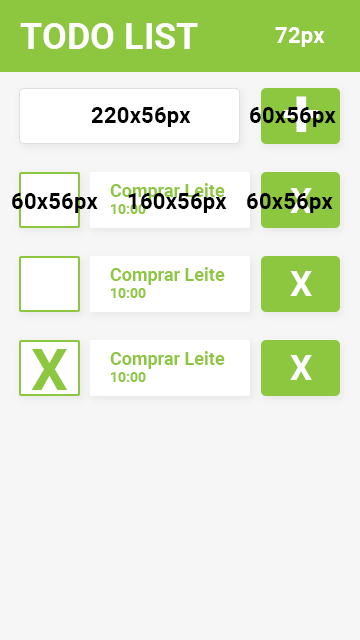
<style>
.page{position:relative;width:360px;height:640px;background:#f6f6f6}
.page>*{position:absolute;margin:0}
.t1{font:36px "Roboto-Bold";color:#ffffff}
.t2{font:22.4px "Roboto-Bold";color:#ffffff}
.t3{font:70.6px "Roboto-Bold";color:#fefefe}
.t4{font:22.4px "Roboto-Bold";color:#000000}
.t5{font:18px "Roboto-Bold";color:#8dc63f}
.t6{font:14px "Roboto-Bold";color:#8dc63f}
.t7{font:35px "Roboto-Bold";color:#ffffff}
.t8{font:58.1px "Roboto-Bold";color:#8dc63f}
</style>
<div class="page">
<p class="t1" style="left:20px;top:23px;width:178px;height:26px">TODO LIST</p>
<p class="t2" style="left:275px;top:27px;width:50px;height:20px">72px</p>
<p class="t3" style="left:284px;top:96px;width:35px;height:36px">+</p>
<p class="t4" style="left:91px;top:107px;width:100px;height:20px">220x56px</p>
<p class="t4" style="left:250px;top:107px;width:86px;height:20px">60x56px</p>
<p class="t5" style="left:110px;top:183px;width:115px;height:31px">Comprar Leite<br><span class="t6">10:00</span></p>
<p class="t4" style="left:12px;top:193px;width:86px;height:20px">60x56px</p>
<p class="t4" style="left:128px;top:193px;width:99px;height:20px">160x56px</p>
<p class="t4" style="left:247px;top:193px;width:86px;height:20px">60x56px</p>
<p class="t7" style="left:290px;top:188px;width:22px;height:25px">X</p>
<p class="t5" style="left:110px;top:267px;width:115px;height:31px">Comprar Leite<br><span class="t6">10:00</span></p>
<p class="t7" style="left:290px;top:271px;width:22px;height:25px">X</p>
<p class="t8" style="left:31px;top:349px;width:37px;height:41px">X</p>
<p class="t5" style="left:110px;top:351px;width:115px;height:31px">Comprar Leite<br><span class="t6">10:00</span></p>
<p class="t7" style="left:290px;top:355px;width:22px;height:25px">X</p>
</div>
